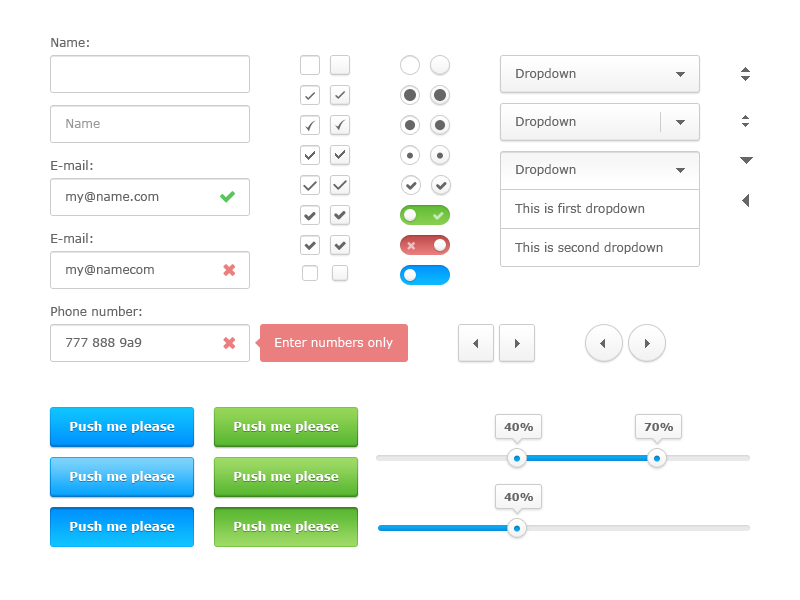
<style>
.page{position:relative;width:800px;height:600px;background:#ffffff}
.page>*{position:absolute;margin:0}
.t1{font:12px "Verdana";color:#666666}
.t2{font:12px "Verdana";color:#999999}
.t3{font:12px/39px "Verdana";color:#666666}
.t4{font:12px "Verdana";color:#ffffff}
.t5{font:12px "Verdana-Bold";color:#ffffff}
.t6{font:11px "Verdana-Bold";color:#666666}
</style>
<div class="page">
<p class="t1" style="left:51px;top:38px;width:38px;height:9px">Name:</p>
<p class="t1" style="left:516px;top:68px;width:60px;height:12px">Dropdown</p>
<p class="t2" style="left:66px;top:119px;width:34px;height:9px">Name</p>
<p class="t1" style="left:516px;top:116px;width:60px;height:12px">Dropdown</p>
<p class="t1" style="left:51px;top:160px;width:42px;height:10px">E-mail:</p>
<p class="t1" style="left:516px;top:164px;width:60px;height:12px">Dropdown</p>
<p class="t1" style="left:66px;top:192px;width:93px;height:11px">my@name.com</p>
<p class="t3" style="left:515px;top:203px;width:148px;height:51px">This is first dropdown<br>This is second dropdown</p>
<p class="t1" style="left:51px;top:233px;width:42px;height:10px">E-mail:</p>
<p class="t1" style="left:66px;top:265px;width:88px;height:11px">my@namecom</p>
<p class="t1" style="left:51px;top:306px;width:91px;height:10px">Phone number:</p>
<p class="t1" style="left:66px;top:338px;width:76px;height:9px">777 888 9a9</p>
<p class="t4" style="left:275px;top:337px;width:118px;height:12px">Enter numbers only</p>
<p class="t5" style="left:70px;top:421px;width:105px;height:12px">Push me please</p>
<p class="t5" style="left:234px;top:421px;width:105px;height:12px">Push me please</p>
<p class="t6" style="left:504px;top:423px;width:30px;height:8px">40%</p>
<p class="t6" style="left:644px;top:423px;width:30px;height:8px">70%</p>
<p class="t5" style="left:70px;top:471px;width:105px;height:12px">Push me please</p>
<p class="t5" style="left:234px;top:471px;width:105px;height:12px">Push me please</p>
<p class="t6" style="left:504px;top:493px;width:30px;height:8px">40%</p>
<p class="t5" style="left:70px;top:521px;width:105px;height:12px">Push me please</p>
<p class="t5" style="left:234px;top:521px;width:105px;height:12px">Push me please</p>
</div>
